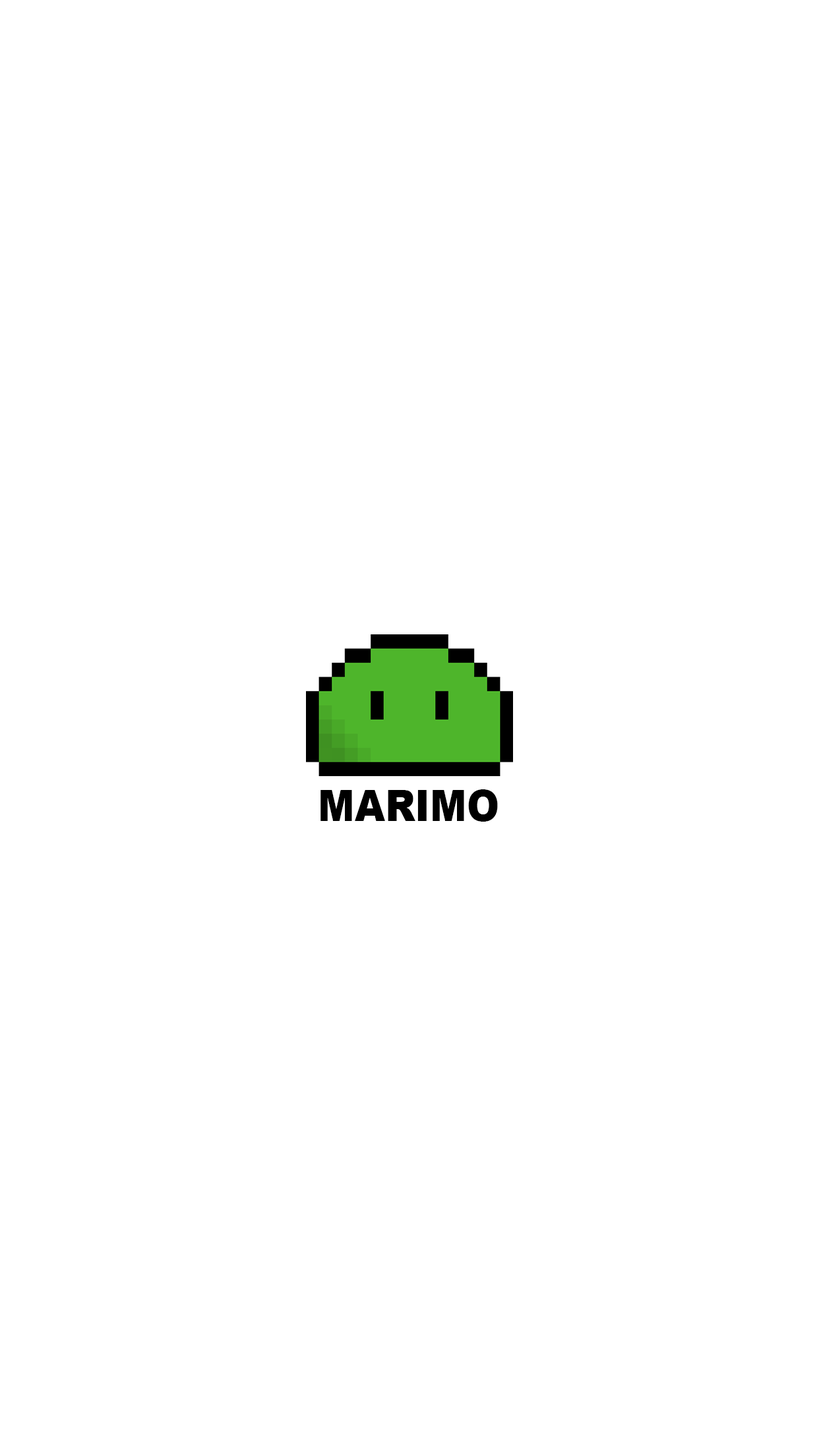
<style>
.page{position:relative;width:819px;height:1456px;background:#ffffff}
.page>*{position:absolute;margin:0}
.t1{font:42.6px "Arial-Black";color:#000000;scale:0.91 1}
</style>
<div class="page">
<p class="t1" style="left:320px;top:789px;width:178px;height:33px">MARIMO</p>
</div>
